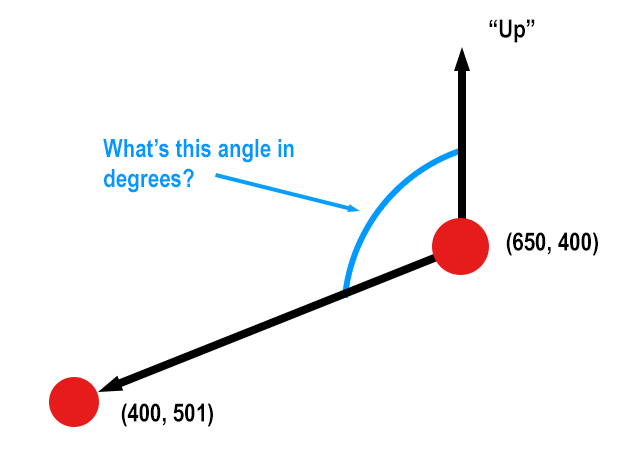
<style>
.page{position:relative;width:617px;height:455px;background:#ffffff}
.page>*{position:absolute;margin:0}
.t1{font:25px "ArialNarrow-Bold";color:#000000}
.t2{font:25px "ArialNarrow-Bold";color:#0099ff}
</style>
<div class="page">
<p class="t1" style="left:489px;top:19px;width:46px;height:24px">“Up”</p>
<p class="t2" style="left:103px;top:139px;width:191px;height:54px">What’s this angle in degrees?</p>
<p class="t1" style="left:506px;top:232px;width:92px;height:24px">(650, 400)</p>
<p class="t1" style="left:121px;top:403px;width:92px;height:24px">(400, 501)</p>
</div>
